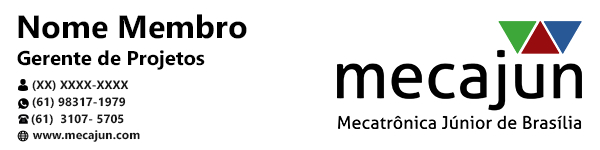
<style>
.page{position:relative;width:600px;height:150px;background:#ffffff}
.page>*{position:absolute;margin:0}
.t1{font:32px "SegoeUI-Bold";color:#000000}
.t2{font:20px "SegoeUI-Bold";color:#000000}
.t3{font:12px "SegoeUI-Bold";color:#171717}
</style>
<div class="page">
<p class="t1" style="left:18px;top:14px;width:229px;height:25px">Nome Membro</p>
<p class="t2" style="left:17px;top:50px;width:188px;height:20px">Gerente de Projetos</p>
<p class="t3" style="left:32px;top:80px;width:97px;height:12px">(XX) XXXX-XXXX</p>
<p class="t3" style="left:32px;top:97px;width:94px;height:12px">(61) 98317-1979</p>
<p class="t3" style="left:31px;top:114px;width:93px;height:12px">(61)  3107- 5705</p>
<p class="t3" style="left:32px;top:130px;width:108px;height:12px">www.mecajun.com</p>
</div>
